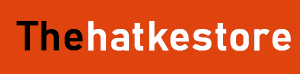
<style>
.page{position:relative;width:300px;height:74px;background:#df440e}
.page>*{position:absolute;margin:0}
.t1{font:70px "Bahnschrift";color:#ffffff;font-weight:bold}
.t2{font:70px "Bahnschrift";color:#000000;font-weight:bold}
</style>
<div class="page">
<p class="t1" style="left:16px;top:21px;width:275px;height:30px"><span class="t2">The</span>hatkestore</p>
</div>
